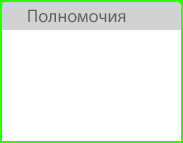
<style>
.page{position:relative;width:183px;height:143px;background:#ffffff}
.page>*{position:absolute;margin:0}
.t1{font:18px "MyriadPro-Regular";color:#5c5c5c}
</style>
<div class="page">
<p class="t1" style="left:28px;top:9px;width:98px;height:14px">Полномочия</p>
</div>
